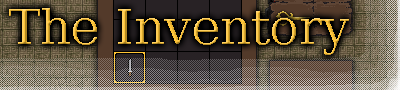
<style>
.page{position:relative;width:400px;height:90px}
.page>*{position:absolute;margin:0}
.t1{font:48px "BitstreamVeraSerif-Roman"}
</style>
<div class="page">
<p class="t1" style="left:9px;top:8px;width:340px;height:47px">The Inventory</p>
</div>
